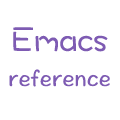
<style>
.page{position:relative;width:120px;height:120px;background:#ffffff}
.page>*{position:absolute;margin:0}
.t1{font:36px "DFWaWaTC-W5";color:#7e5bb3}
.t2{font:24px "HannotateTC-W5";color:#7e5bb3}
</style>
<div class="page">
<p class="t1" style="left:13px;top:27px;width:95px;height:25px">Emacs</p>
<p class="t2" style="left:9px;top:69px;width:101px;height:18px">reference</p>
</div>
